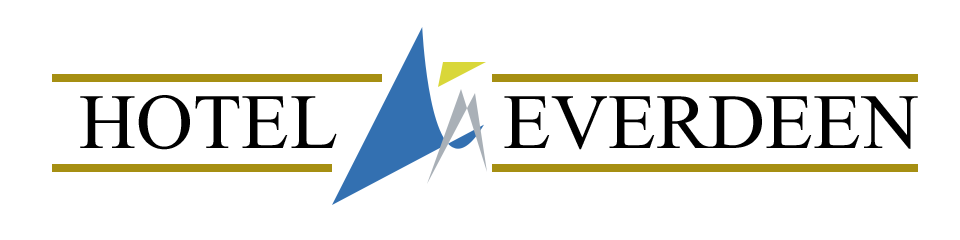
<style>
.page{position:relative;width:960px;height:240px;background:#ffffff}
.page>*{position:absolute;margin:0}
.t1{font:97px "Aparajita";color:#000000}
.t2{font:97.2px "Aparajita";color:#000000}
</style>
<div class="page">
<p class="t1" style="left:80px;top:95px;width:257px;height:55px">HOTEL</p>
<p class="t2" style="left:504px;top:96px;width:414px;height:54px">EVERDEEN</p>
</div>
